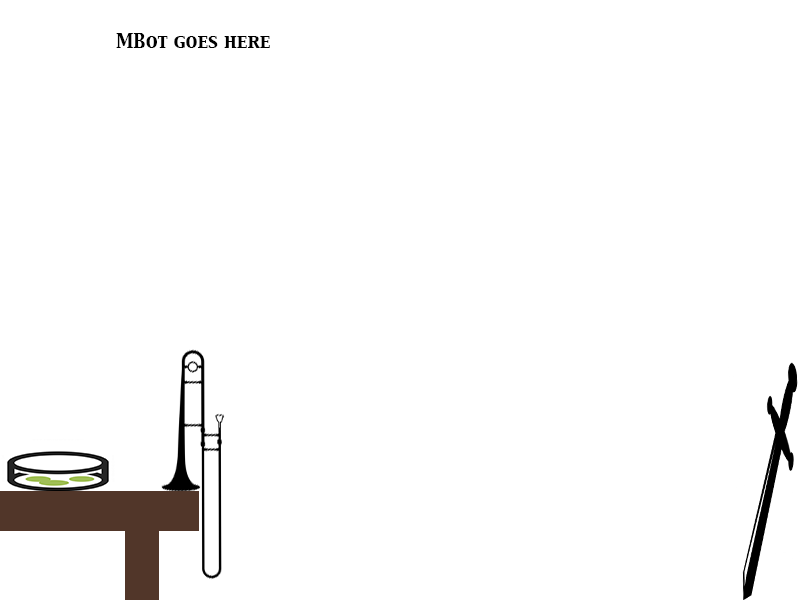
<style>
.page{position:relative;width:800px;height:600px;background:#ffffff}
.page>*{position:absolute;margin:0}
.t1{font:18px "CapitalsRegular";color:#000000}
</style>
<div class="page">
<p class="t1" style="left:116px;top:33px;width:154px;height:15px">MBot goes here</p>
</div>
